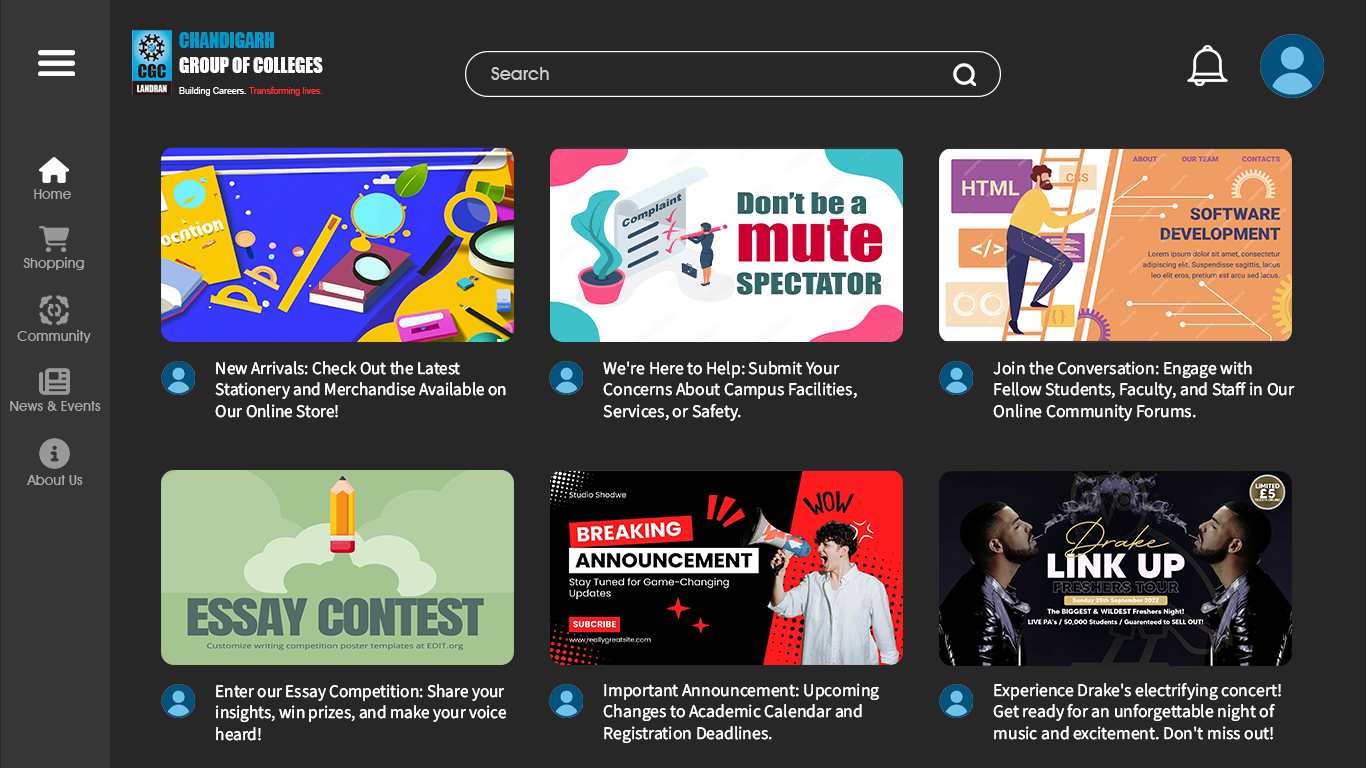
<style>
.page{position:relative;width:1366px;height:768px;background:#272727}
.page>*{position:absolute;margin:0}
.t1{font:20.2px "Impact";color:#ffffff;scale:0.92 1}
.t2{font:20.2px "Impact";color:#0099cc;scale:0.92 1}
.t3{font:18.4px "AvantGardeITCbyBT-Medium";color:#cccccc}
.t4{font:9.6px "ArialMT";color:#ff3333;scale:0.92 1}
.t5{font:9.6px "ArialMT";color:#ffffff;scale:0.92 1}
.t6{font:14px "AvantGardeITCbyBT-Medium";color:#acacac}
.t7{font:17.7px "SourceSansRoman-Regular";color:#ffffff}
</style>
<div class="page">
<p class="t1" style="left:179px;top:32px;width:144px;height:41px"><span class="t2">CHANDIGARH<br></span>GROUP OF COLLEGES</p>
<p class="t3" style="left:491px;top:67px;width:58px;height:13px">Search</p>
<p class="t4" style="left:179px;top:87px;width:144px;height:9px"><span class="t5">Building Careers. </span>Transforming lives.</p>
<p class="t6" style="left:34px;top:189px;width:37px;height:10px">Home</p>
<p class="t6" style="left:23px;top:257px;width:61px;height:13px">Shopping</p>
<p class="t6" style="left:17px;top:330px;width:74px;height:13px">Community</p>
<p class="t7" style="left:215px;top:361px;width:291px;height:57px">New Arrivals: Check Out the Latest Stationery and Merchandise Available on Our Online Store!</p>
<p class="t7" style="left:603px;top:361px;width:254px;height:60px">We're Here to Help: Submit Your Concerns About Campus Facilities, Services, or Safety.</p>
<p class="t7" style="left:993px;top:361px;width:302px;height:60px">Join the Conversation: Engage with Fellow Students, Faculty, and Staff in Our Online Community Forums.</p>
<p class="t6" style="left:10px;top:401px;width:91px;height:10px">News &amp; Events</p>
<p class="t6" style="left:27px;top:475px;width:56px;height:10px">About Us</p>
<p class="t7" style="left:216px;top:684px;width:290px;height:57px">Enter our Essay Competition: Share your insights, win prizes, and make your voice heard!</p>
<p class="t7" style="left:603px;top:683px;width:276px;height:61px">Important Announcement: Upcoming Changes to Academic Calendar and Registration Deadlines.</p>
<p class="t7" style="left:993px;top:683px;width:288px;height:57px">Experience Drake's electrifying concert! Get ready for an unforgettable night of music and excitement. Don't miss out!</p>
</div>
